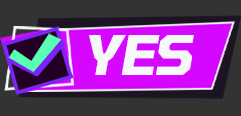
<style>
.page{position:relative;width:241px;height:116px;background:#333333}
.page>*{position:absolute;margin:0}
.t1{font:54.3px "Tomorrow-BoldItalic";letter-spacing:-0.02em;color:#f6f8fa}
</style>
<div class="page">
<p class="t1" style="left:89px;top:35px;width:105px;height:40px">YES</p>
</div>
